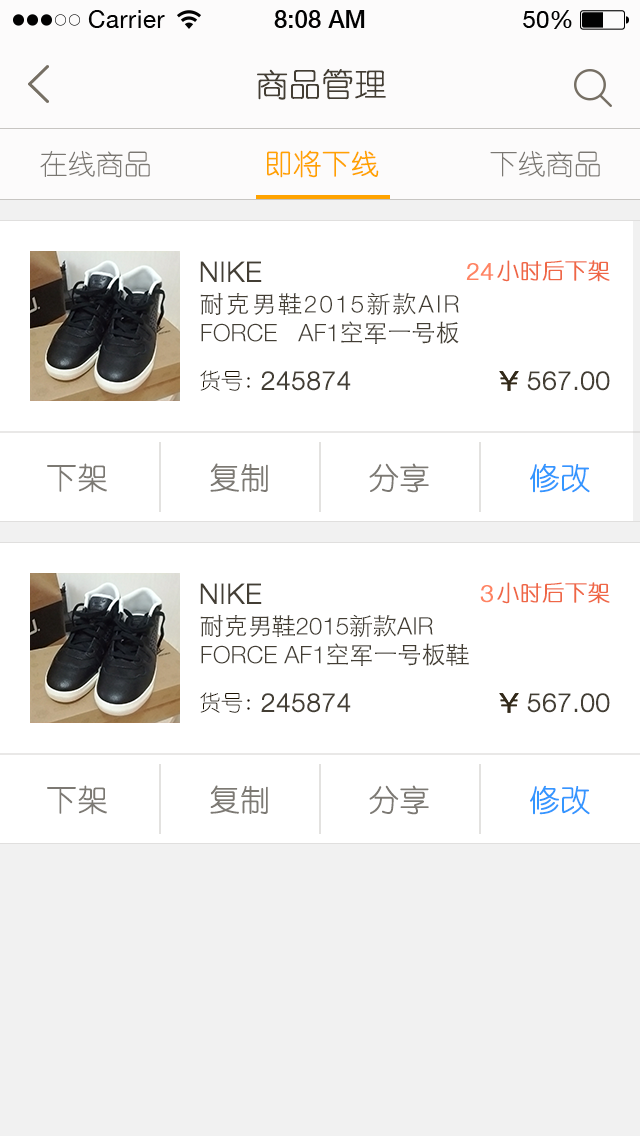
<style>
.page{position:relative;width:640px;height:1136px;background:#ffffff}
.page>*{position:absolute;margin:0}
.t1{font:32px "YouYuan";color:#433d33;text-transform:uppercase;font-weight:bold}
.t2{font:28px "YouYuan";color:#7a7772;text-transform:uppercase}
.t3{font:28px "YouYuan";color:#ffa300;text-transform:uppercase;font-weight:bold}
.t4{font:28px "HelveticaNeueLTPro-Lt";color:#433e34;text-transform:uppercase;font-weight:bold}
.t5{font:24px "HelveticaNeueLTPro-Lt";color:#ff8462;text-transform:uppercase;font-weight:bold}
.t6{font:22px "YouYuan";color:#ef6746;text-transform:uppercase;font-weight:bold}
.t7{font:24px "HelveticaNeueLTPro-Lt";color:#433e34;text-transform:uppercase}
.t8{font:24px "STHeitiSC-Light";color:#433e34;text-transform:uppercase}
.t9{font:22px "YouYuan";color:#1b1100;text-transform:uppercase}
.t10{font:26px "HelveticaNeueLTPro-Lt";color:#433e34;text-transform:uppercase;font-weight:bold}
.t11{font:30px "YouYuan";color:#7c7973;text-transform:uppercase;font-weight:bold}
.t12{font:30px "YouYuan";color:#3496ff;text-transform:uppercase;font-weight:bold}
</style>
<div class="page">
<p class="t1" style="left:257px;top:69px;width:129px;height:31px">商品管理</p>
<p class="t2" style="left:40px;top:150px;width:110px;height:28px">在线商品</p>
<p class="t3" style="left:267px;top:150px;width:112px;height:28px">即将下线</p>
<p class="t2" style="left:490px;top:150px;width:110px;height:28px">下线商品</p>
<p class="t4" style="left:200px;top:261px;width:62px;height:21px">NIKE</p>
<p class="t5" style="left:466px;top:263px;width:28px;height:17px">24</p>
<p class="t6" style="left:497px;top:260px;width:113px;height:22px">小时后下架</p>
<p class="t7" style="left:200px;top:292px;width:259px;height:52px;text-align:justify"><span class="t8">耐克男鞋</span>2015<span class="t8">新款</span>air force AF1<span class="t8">空军一号板鞋</span></p>
<p class="t9" style="left:200px;top:370px;width:50px;height:21px">货号:</p>
<p class="t10" style="left:261px;top:371px;width:90px;height:20px">245874</p>
<p class="t10" style="left:527px;top:371px;width:83px;height:20px">567.00</p>
<p class="t11" style="left:47px;top:463px;width:60px;height:30px">下架</p>
<p class="t11" style="left:210px;top:463px;width:58px;height:29px">复制</p>
<p class="t11" style="left:369px;top:463px;width:60px;height:30px">分享</p>
<p class="t12" style="left:530px;top:463px;width:60px;height:30px">修改</p>
<p class="t6" style="left:497px;top:582px;width:113px;height:22px">小时后下架</p>
<p class="t4" style="left:200px;top:583px;width:62px;height:21px">NIKE</p>
<p class="t5" style="left:480px;top:585px;width:13px;height:18px">3</p>
<p class="t7" style="left:200px;top:614px;width:269px;height:52px"><span class="t8">耐克男鞋</span>2015<span class="t8">新款</span>air force AF1<span class="t8">空军一号板鞋</span></p>
<p class="t9" style="left:200px;top:692px;width:50px;height:21px">货号:</p>
<p class="t10" style="left:261px;top:693px;width:90px;height:20px">245874</p>
<p class="t10" style="left:527px;top:693px;width:83px;height:20px">567.00</p>
<p class="t11" style="left:47px;top:785px;width:60px;height:30px">下架</p>
<p class="t11" style="left:210px;top:785px;width:58px;height:29px">复制</p>
<p class="t11" style="left:369px;top:785px;width:60px;height:30px">分享</p>
<p class="t12" style="left:530px;top:785px;width:60px;height:30px">修改</p>
</div>
